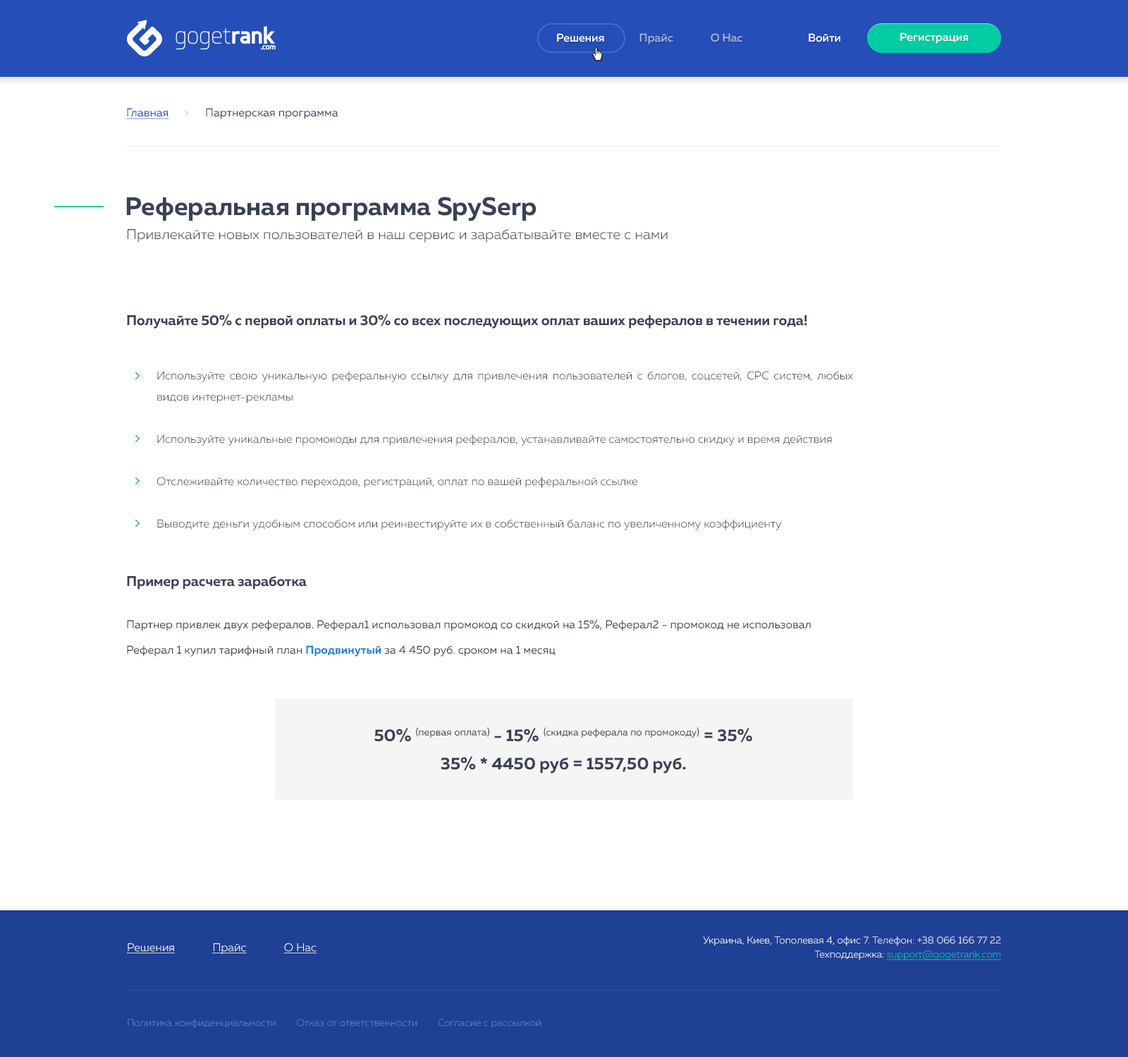
<style>
.page{position:relative;width:1128px;height:1057px;background:#ffffff}
.page>*{position:absolute;margin:0}
.t1{font:11.3px "MullerMedium";color:#a8b3dd}
.t2{font:11.3px "MullerMedium";color:#ffffff}
.t3{font:11.3px "MullerMedium";color:#fefefe}
.t4{font:11.3px "MullerRegular";color:#3a4156}
.t5{font:11.3px "MullerRegular";color:#264eb8;text-decoration:underline}
.t6{font:25.4px "MullerBold";color:#3a4156}
.t7{font:14.1px "MullerLight";color:#3a4156}
.t8{font:14.1px "MullerBold";letter-spacing:-0.01em;color:#3a4156}
.t9{font:11.3px/42.3px "MullerLight";color:#3a4156}
.t10{font:11.3px/21.2px "MullerLight";color:#3a4156}
.t11{font:11.3px/42.3px "MullerRegular";color:#3a4156}
.t12{font:14.1px/32.4px "MullerBold";letter-spacing:-0.01em;color:#3a4156}
.t13{font:11.3px/25.4px "MullerRegular";color:#3a4156}
.t14{font:11.3px/25.4px "MullerBold";color:#2383d2}
.t15{font:16.9px/28.2px "MullerBold";color:#3a4156}
.t16{font:16.9px/28.2px "MullerRegular";color:#3a4156}
.t17{font:9.9px/14.1px "MullerLight";color:#ffffff}
.t18{font:9.9px/14.1px "MullerLight";color:#01cca3;text-decoration:underline}
.t19{font:11.3px "MullerLight";color:#ffffff;text-decoration:underline}
.t20{font:9.9px "MullerLight";color:#6181d7}
</style>
<div class="page">
<p class="t1" style="left:557px;top:33px;width:185px;height:11px"><span class="t2">Решения</span>             Прайс              О Нас</p>
<p class="t3" style="left:809px;top:33px;width:31px;height:9px">Войти</p>
<p class="t3" style="left:900px;top:32px;width:68px;height:12px">Регистрация</p>
<p class="t4" style="left:126px;top:108px;width:212px;height:11px"><span class="t5">Главная             </span>Партнерская программа</p>
<p class="t6" style="left:126px;top:197px;width:411px;height:24px">Реферальная программа SpySerp</p>
<p class="t7" style="left:128px;top:228px;width:540px;height:15px">Привлекайте новых пользователей в наш сервис и зарабатывайте вместе с нами</p>
<p class="t8" style="left:127px;top:314px;width:680px;height:15px">Получайте 50% с первой оплаты и 30% со всех последующих оплат ваших рефералов в течении года!</p>
<p class="t9" style="left:157px;top:371px;width:696px;height:159px;text-align:justify">Используйте свою уникальную реферальную ссылку для привлечения пользователей с блогов, соцсетей, СРС систем, любых <span class="t10">видов интернет-рекламы<br></span>Используйте уникальные промокоды для привлечения рефералов, устанавливайте самостоятельно скидку и время действия<br>Отслеживайте количество переходов, регистраций, оплат по вашей реферальной ссылке<br>Выводите деньги удобным способом или реинвестируйте их в собственный баланс по увеличенному коэффициенту</p>
<p class="t11" style="left:127px;top:575px;width:684px;height:81px;text-align:justify"><span class="t12">Пример расчета заработка<br></span>Партнер привлек двух рефералов. Реферал1 использовал промокод со скидкой на 15%, Реферал2 - промокод не использовал<br><span class="t13">Реферал 1 купил тарифный план </span><span class="t14">Продвинутый</span><span class="t13"> за 4 450 руб. сроком на 1 месяц</span></p>
<p class="t15" style="left:374px;top:727px;width:378px;height:47px;text-align:center">50% <span class="t16">(первая оплата) </span>- 15% <span class="t16">(скидка реферала по промокоду) </span>= 35%<br>35% * 4450 руб = 1557,50 руб.</p>
<p class="t17" style="left:703px;top:936px;width:299px;height:24px;text-align:right">Украина, Киев, Тополевая 4, офис 7. Телефон: +38 066 166 77 22<br>Техподдержка: <span class="t18">support@gogetrank.com</span></p>
<p class="t19" style="left:127px;top:943px;width:190px;height:11px">Решения             Прайс             О Нас</p>
<p class="t20" style="left:128px;top:1019px;width:414px;height:9px">Политика конфиденциальности        Отказ от ответственности        Согласие с рассылкой</p>
</div>
